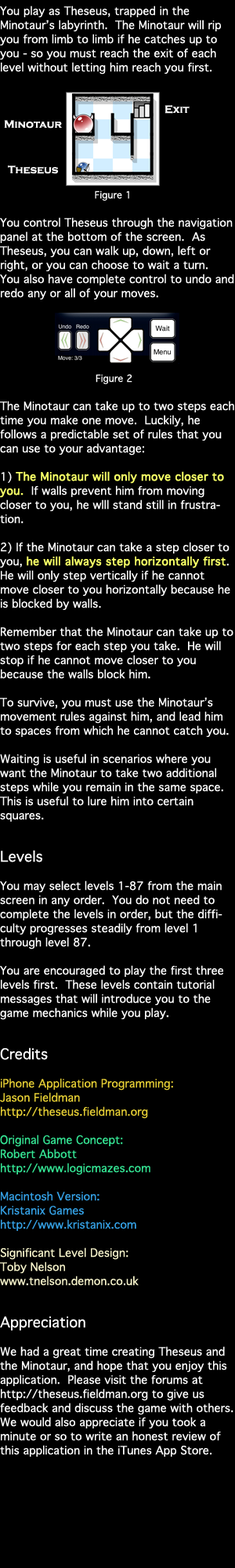
<style>
.page{position:relative;width:235px;height:1568px;background:#000000}
.page>*{position:absolute;margin:0}
.t1{font:11px/14.1px "Geneva";color:#ffffff}
.t2{font:9.4px/14.1px "Geneva";color:#ffffff}
.t3{font:11px/14.1px "Geneva";color:#f6ff65;font-weight:bold}
.t4{font:14.1px/14.1px "Geneva";color:#ffffff}
.t5{font:11px/14.1px "Geneva";color:#e4cd34}
.t6{font:11px/14.1px "Geneva";color:#34e493}
.t7{font:11px/14.1px "Geneva";color:#34a0e4}
.t8{font:11px/14.1px "Geneva";color:#f5f2c9}
.t9{font:11px "CopperplateGothic-Bold";color:#ffffff}
</style>
<div class="page">
<p class="t1" style="left:0px;top:5px;width:234px;height:1452px">You play as Theseus, trapped in the Minotaur’s labyrinth.  The Minotaur will rip you from limb to limb if he catches up to you - so you must reach the exit of each level without letting him reach you first.<br><br><br><br><br><br><br><br><br>    <span class="t2">  Figure 1<br></span><br>You control Theseus through the navigation panel at the bottom of the screen.  As Theseus, you can walk up, down, left or right, or you can choose to wait a turn.  You also have complete control to undo and redo any or all of your moves.<br><br><br><br><br><br>      <span class="t2">Figure 2<br></span><br>The Minotaur can take up to two steps each time you make one move.  Luckily, he follows a predictable set of rules that you can use to your advantage:<br><br>1) <span class="t3">The Minotaur will only move closer to you.</span>  If walls prevent him from moving closer to you, he wlll stand still in frustration.<br><br>2) If the Minotaur can take a step closer to you, <span class="t3">he will always step horizontally first</span>.  He will only step vertically if he cannot move closer to you horizontally because he is blocked by walls.<br><br>Remember that the Minotaur can take up to two steps for each step you take.  He will stop if he cannot move closer to you because the walls block him.<br><br>To survive, you must use the Minotaur’s movement rules against him, and lead him to spaces from which he cannot catch you.<br><br>Waiting is useful in scenarios where you want the Minotaur to take two additional steps while you remain in the same space.  This is useful to lure him into certain squares.<br><br><br><span class="t4">Levels<br></span><br>You may select levels 1-87 from the main screen in any order.  You do not need to complete the levels in order, but the difficulty progresses steadily from level 1 through level 87.<br><br>You are encouraged to play the first three levels first.  These levels contain tutorial messages that will introduce you to the game mechanics while you play.<br><br><br><span class="t4">Credits<br><br></span><span class="t5">iPhone Application Programming:<br>Jason Fieldman<br>http://theseus.fieldman.org<br><br></span><span class="t6">Original Game Concept:<br>Robert Abbott<br>http://www.logicmazes.com<br><br></span><span class="t7">Macintosh Version:<br>Kristanix Games<br>http://www.kristanix.com<br><br></span><span class="t8">Significant Level Design:<br>Toby Nelson<br>www.tnelson.demon.co.uk<br><br><br></span><span class="t4">Appreciation</span><br><br>We had a great time creating Theseus and the Minotaur, and hope that you enjoy this application.  Please visit the forums at http://theseus.fieldman.org to give us feedback and discuss the game with others.  We would also appreciate if you took a minute or so to write an honest review of this application in the iTunes App Store.</p>
<p class="t9" style="left:165px;top:105px;width:25px;height:9px">Exit</p>
<p class="t9" style="left:4px;top:120px;width:58px;height:9px">Minotaur</p>
<p class="t9" style="left:8px;top:165px;width:51px;height:9px">Theseus</p>
</div>
